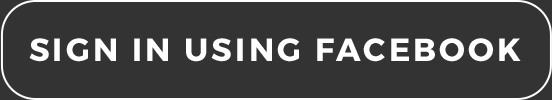
<style>
.page{position:relative;width:552px;height:100px;background:#333333}
.page>*{position:absolute;margin:0}
.t1{font:32px "Montserrat-Bold";letter-spacing:0.1em;color:#ffffff;text-transform:uppercase}
</style>
<div class="page">
<p class="t1" style="left:29px;top:38px;width:492px;height:24px">Sign In Using Facebook</p>
</div>
